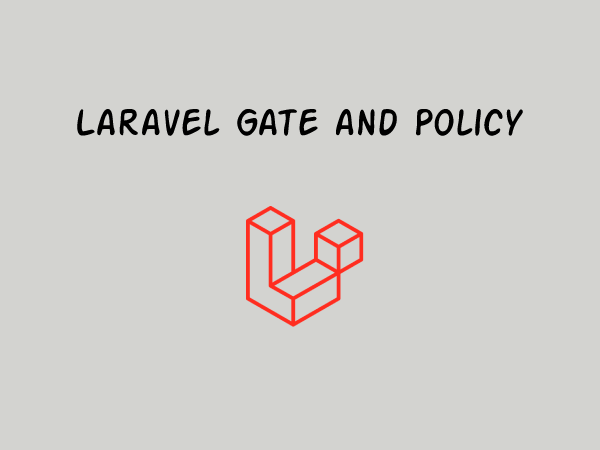
<style>
.page{position:relative;width:600px;height:450px;background:#d3d3d0}
.page>*{position:absolute;margin:0}
.t1{font:41px "ActionMan";color:#000000}
</style>
<div class="page">
<p class="t1" style="left:77px;top:108px;width:446px;height:28px">Laravel Gate and Policy</p>
</div>
